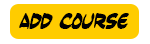
<style>
.page{position:relative;width:150px;height:44px;background:#ffcc00}
.page>*{position:absolute;margin:0}
.t1{font:15.9px "Yesterdaysmeal";color:#000000}
</style>
<div class="page">
<p class="t1" style="left:19px;top:13px;width:110px;height:16px">Add course</p>
</div>
